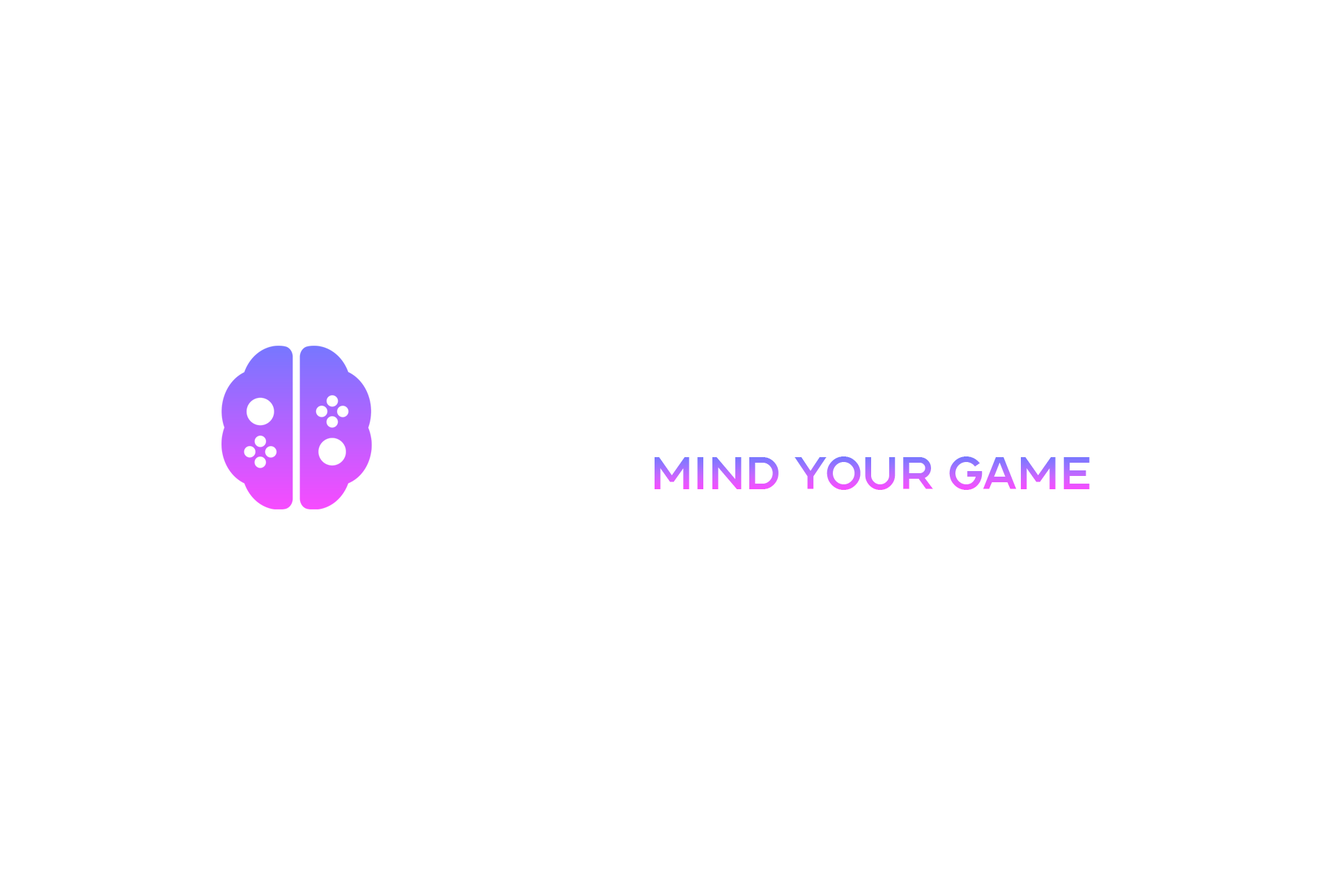
<style>
.page{position:relative;width:1337px;height:892px;background:#ffffff}
.page>*{position:absolute;margin:0}
.t1{font:45px "ConneqtRegular"}
</style>
<div class="page">
<p class="t1" style="left:655px;top:456px;width:435px;height:34px">MIND YOUR GAME</p>
</div>
